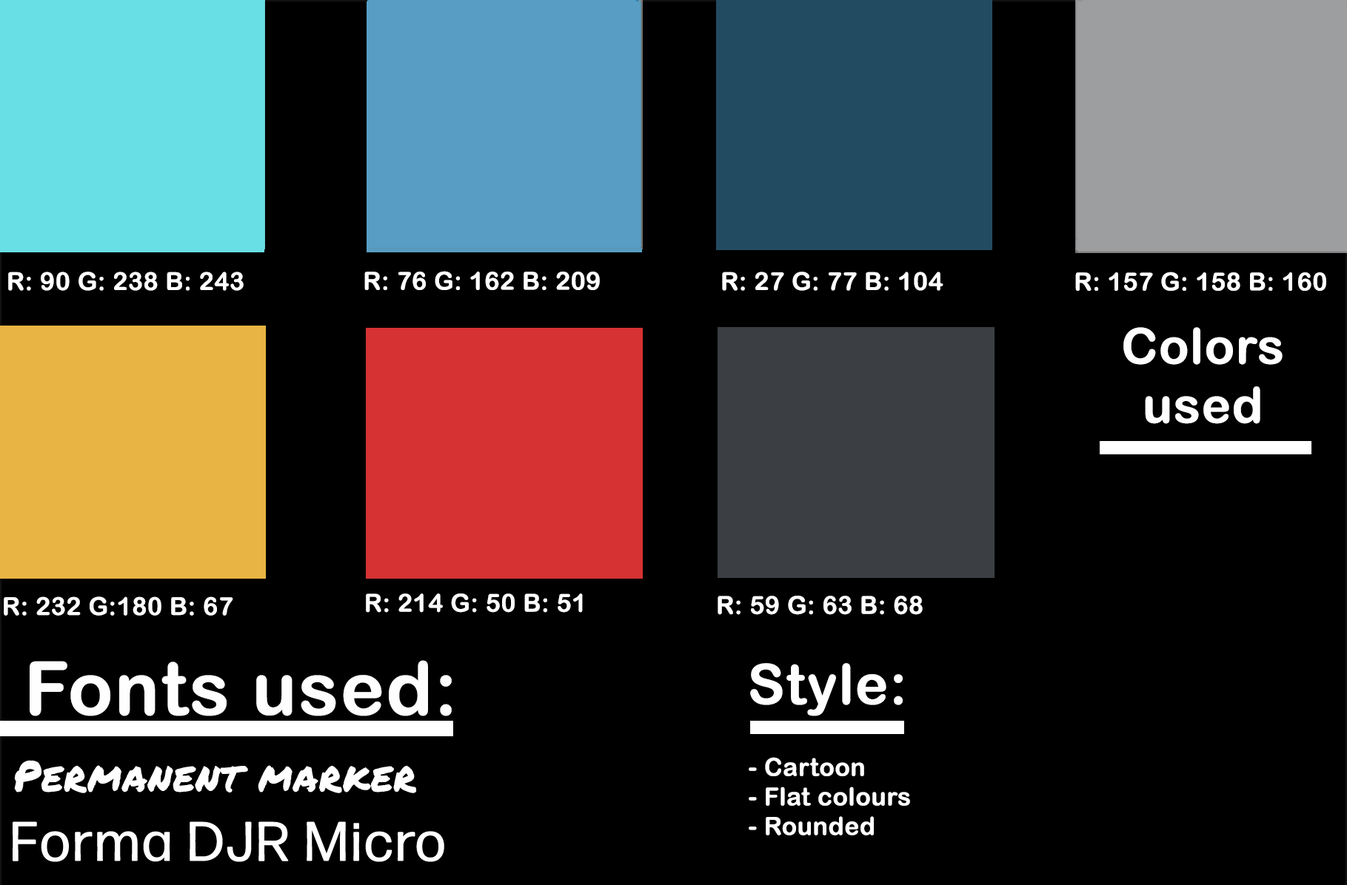
<style>
.page{position:relative;width:1347px;height:885px;background:#000000}
.page>*{position:absolute;margin:0}
.t1{font:24.6px "ArialRoundedMTBold";color:#ffffff;font-weight:bold}
.t2{font:49.2px "ArialRoundedMTBold";color:#fffefe;font-weight:bold}
.t3{font:24.6px "ArialRoundedMTBold";color:#fffefe;font-weight:bold}
.t4{font:73.8px "ArialRoundedMTBold";color:#fffefe;font-weight:bold}
.t5{font:55.3px "ArialRoundedMTBold";color:#ffffff;font-weight:bold}
.t6{font:41.8px "PermanentMarker-Regular";color:#ffffff;font-weight:bold}
.t7{font:55.3px "FormaDJRMicro-Regular";color:#ffffff;font-weight:bold}
.t8{font:55.3px "BarricadaPro";color:#ffffff;font-weight:bold}
</style>
<div class="page">
<p class="t1" style="left:8px;top:272px;width:236px;height:19px">R: 90 G: 238 B: 243</p>
<p class="t1" style="left:364px;top:271px;width:236px;height:19px">R: 76 G: 162 B: 209</p>
<p class="t1" style="left:722px;top:272px;width:221px;height:19px">R: 27 G: 77 B: 104</p>
<p class="t1" style="left:1075px;top:272px;width:251px;height:19px">R: 157 G: 158 B: 160</p>
<p class="t2" style="left:1123px;top:327px;width:159px;height:97px;text-align:center">Colors used</p>
<p class="t3" style="left:366px;top:594px;width:217px;height:19px">R: 214 G: 50 B: 51</p>
<p class="t3" style="left:4px;top:597px;width:229px;height:19px">R: 232 G:180 B: 67</p>
<p class="t3" style="left:717px;top:596px;width:205px;height:19px">R: 59 G: 63 B: 68</p>
<p class="t4" style="left:30px;top:660px;width:422px;height:57px">Fonts used:</p>
<p class="t5" style="left:750px;top:663px;width:152px;height:54px">Style:</p>
<p class="t6" style="left:14px;top:760px;width:403px;height:34px">Permanent marker</p>
<p class="t1" style="left:748px;top:757px;width:162px;height:79px">- Cartoon<br>- Flat colours<br>- Rounded</p>
<p class="t7" style="left:13px;top:822px;width:431px;height:41px"><span class="t8"> </span>Forma DJR Micro</p>
</div>
